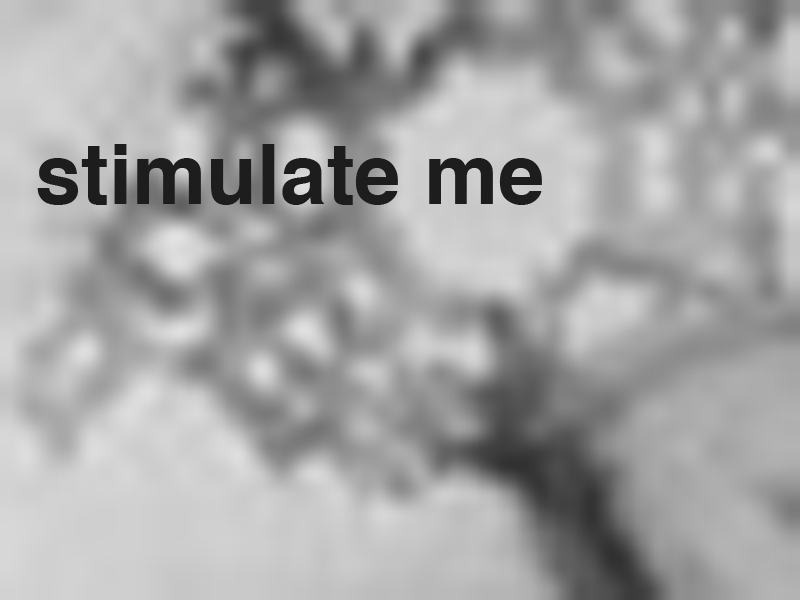
<style>
.page{position:relative;width:800px;height:600px}
.page>*{position:absolute;margin:0}
.t1{font:83.3px "Helvetica-Bold";color:#1d1d1d}
</style>
<div class="page">
<p class="t1" style="left:37px;top:144px;width:505px;height:61px">stimulate me</p>
</div>
